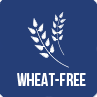
<style>
.page{position:relative;width:97px;height:97px;background:#253e77}
.page>*{position:absolute;margin:0}
.t1{font:18px "BebasNeue";color:#ffffff}
</style>
<div class="page">
<p class="t1" style="left:17px;top:73px;width:69px;height:13px">wheat-free</p>
</div>
